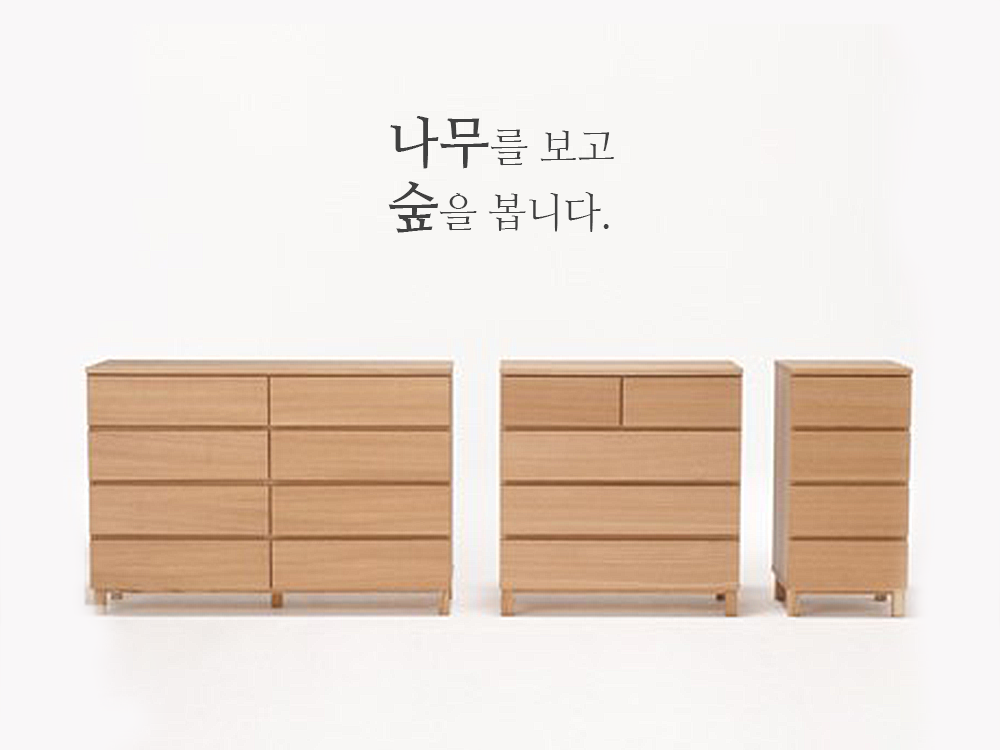
<style>
.page{position:relative;width:1000px;height:750px;background:#f9f7f8}
.page>*{position:absolute;margin:0}
.t1{font:41px "NanumMyeongjo";letter-spacing:-0.01em;color:#404040}
.t2{font:55.5px "NanumMyeongjoBold";letter-spacing:0.01em;color:#404040;scale:0.96 1}
</style>
<div class="page">
<p class="t1" style="left:388px;top:116px;width:226px;height:117px"><span class="t2">나무</span>를 보고<br><span class="t2">숲</span>을 봅니다.</p>
</div>
